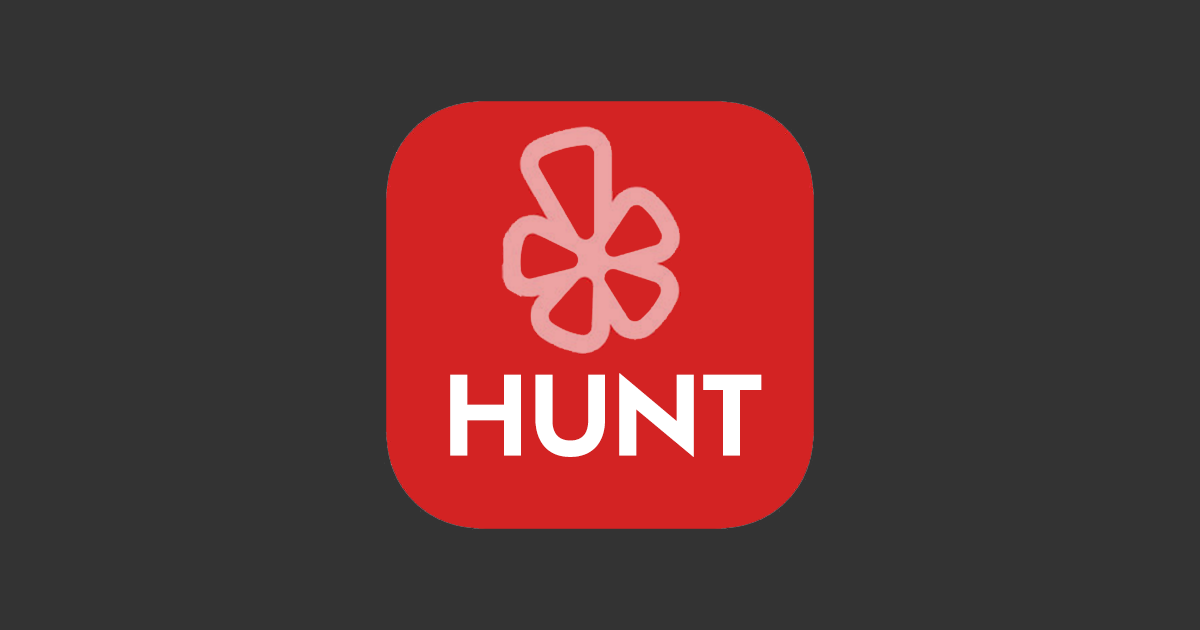
<style>
.page{position:relative;width:1200px;height:630px;background:#333333}
.page>*{position:absolute;margin:0}
.t1{font:108.2px "Sifonn-Basic";color:#ffffff}
</style>
<div class="page">
<p class="t1" style="left:450px;top:373px;width:312px;height:84px">HUNT</p>
</div>
